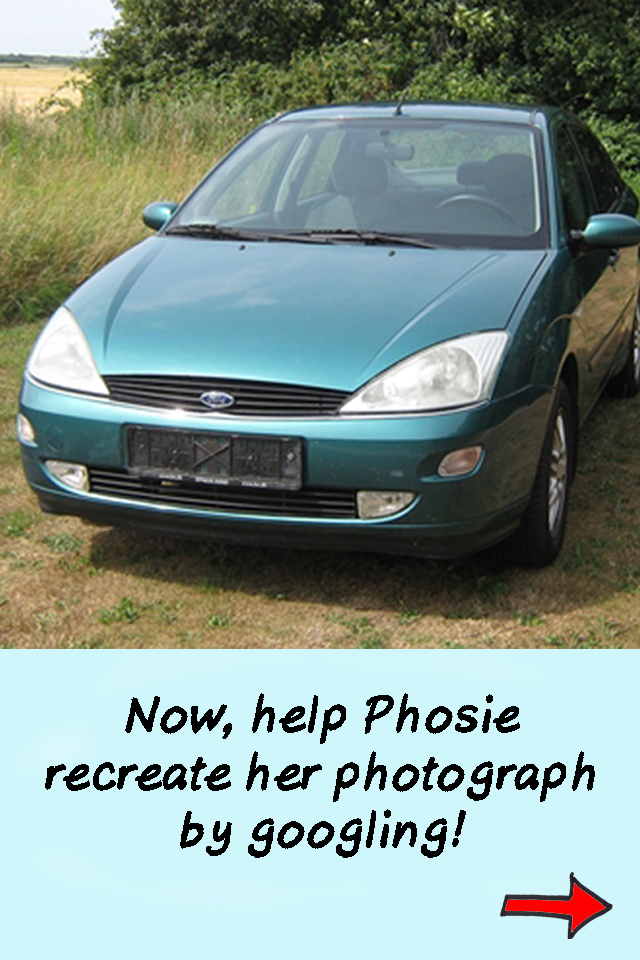
<style>
.page{position:relative;width:640px;height:960px;background:#cef6fb}
.page>*{position:absolute;margin:0}
.t1{font:48px "AxureHandwriting-BoldItalic";color:#000000}
</style>
<div class="page">
<p class="t1" style="left:45px;top:693px;width:550px;height:165px;text-align:center">Now, help Phosie<br>recreate her photograph<br>by googling!</p>
</div>
